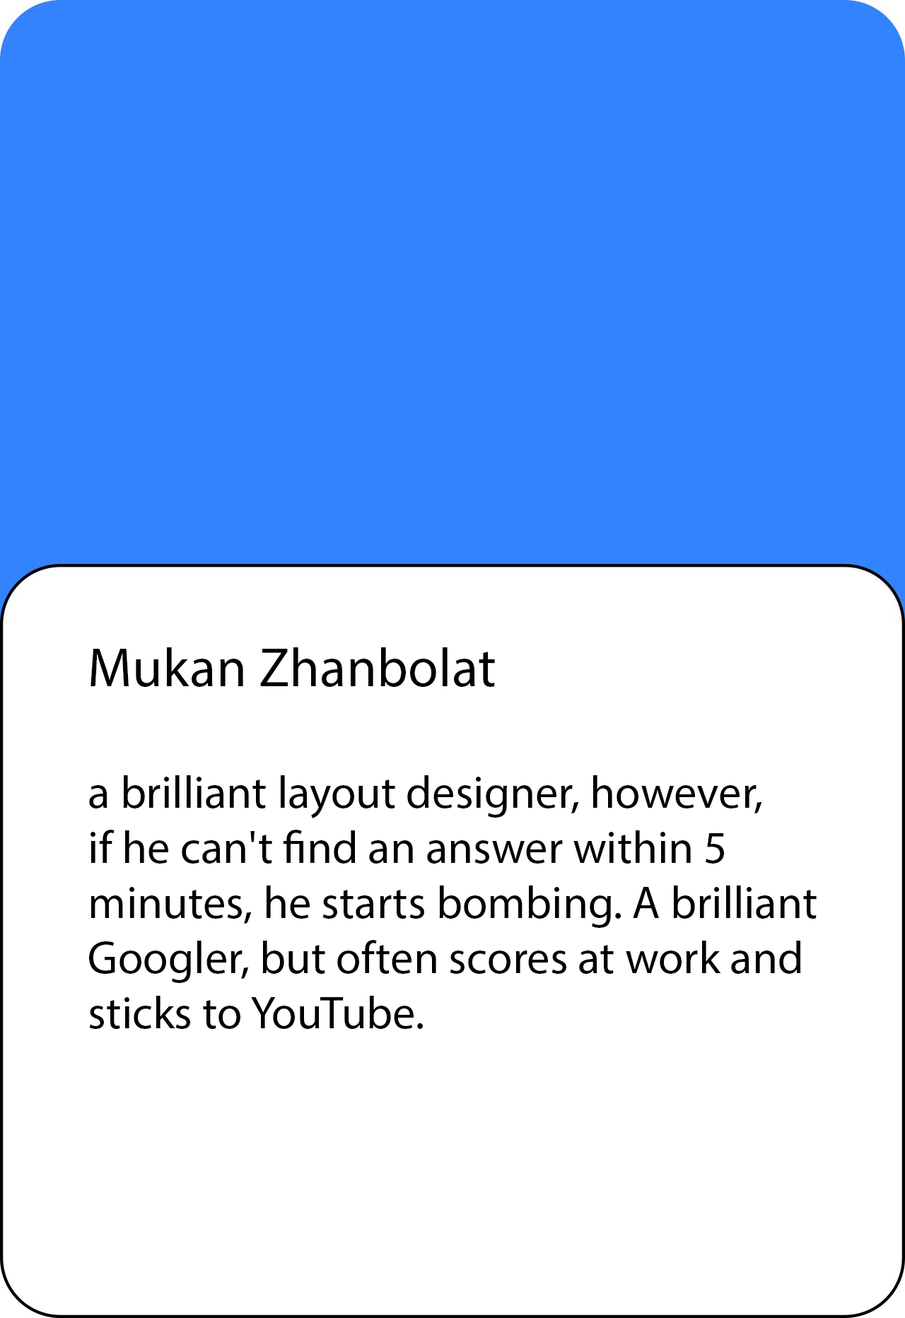
<style>
.page{position:relative;width:905px;height:1318px;background:#ffffff}
.page>*{position:absolute;margin:0}
.t1{font:45.9px "MyriadPro-Regular";color:#000000}
.t2{font:55.1px "MyriadPro-Regular";color:#000000}
</style>
<div class="page">
<p class="t1" style="left:89px;top:647px;width:727px;height:382px"><span class="t2">Mukan Zhanbolat<br><br></span>a brilliant layout designer, however, <br>if he can't find an answer within 5 <br>minutes, he starts bombing. A brilliant <br>Googler, but often scores at work and <br>sticks to YouTube.</p>
</div>
